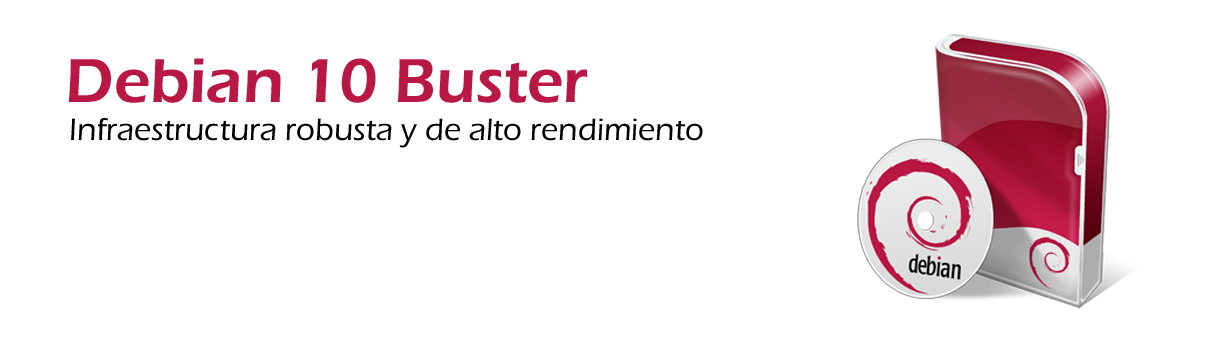
<style>
.page{position:relative;width:1217px;height:350px;background:#ffffff}
.page>*{position:absolute;margin:0}
.t1{font:64px "ErasITC-Demi";color:#b81843}
.t2{font:32px "ErasITC-Medium";color:#000000}
</style>
<div class="page">
<p class="t1" style="left:68px;top:58px;width:520px;height:45px">Debian 10 Buster</p>
<p class="t2" style="left:71px;top:118px;width:632px;height:30px">Infraestructura robusta y de alto rendimiento</p>
</div>
